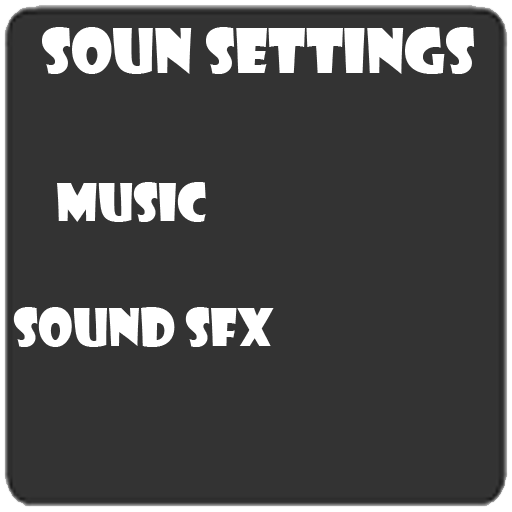
<style>
.page{position:relative;width:512px;height:512px;background:#333333}
.page>*{position:absolute;margin:0}
.t1{font:60px "ShowcardGothic-Reg";color:#ffffff}
.t2{font:50px "ShowcardGothic-Reg";color:#ffffff}
</style>
<div class="page">
<p class="t1" style="left:42px;top:27px;width:433px;height:47px">SOUN SETTINGS</p>
<p class="t2" style="left:57px;top:182px;width:149px;height:40px">music</p>
<p class="t2" style="left:13px;top:307px;width:261px;height:40px">sOUND sfx</p>
</div>
